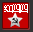
<style>
.page{position:relative;width:33px;height:32px;background:#c50000}
.page>*{position:absolute;margin:0}
.t1{font:10.4px "SimSun";letter-spacing:-0.25em;color:#ffffff}
</style>
<div class="page">
<p class="t1" style="left:4px;top:4px;width:24px;height:9px">红四四</p>
</div>
